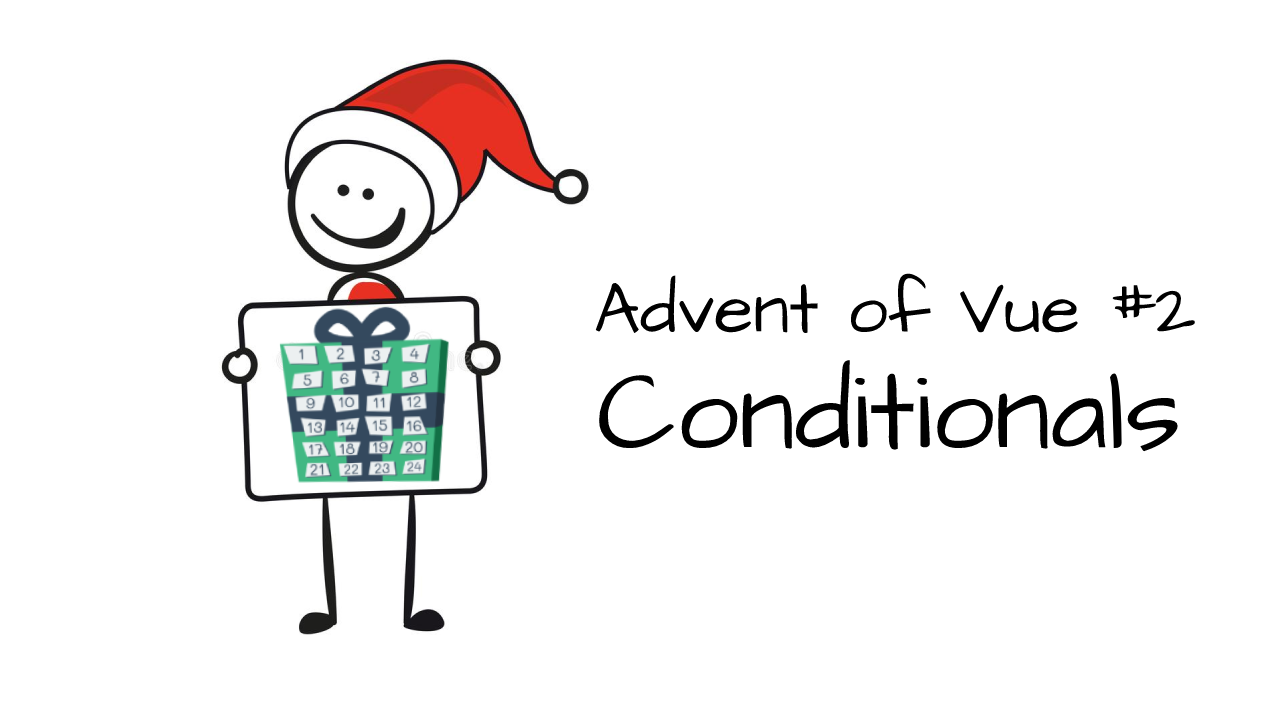
<style>
.page{position:relative;width:1280px;height:720px;background:#ffffff}
.page>*{position:absolute;margin:0}
.t1{font:72px "ArchitectsDaughter-Regular";color:#000000}
.t2{font:112px "ArchitectsDaughter-Regular";color:#000000}
</style>
<div class="page">
<p class="t1" style="left:595px;top:273px;width:600px;height:61px">Advent of Vue #2</p>
<p class="t2" style="left:599px;top:360px;width:579px;height:92px">Conditionals</p>
</div>
